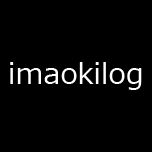
<style>
.page{position:relative;width:152px;height:152px;background:#000000}
.page>*{position:absolute;margin:0}
.t1{font:29.2px "Meiryo";color:#ffffff}
</style>
<div class="page">
<p class="t1" style="left:10px;top:62px;width:132px;height:28px">imaokilog</p>
</div>
